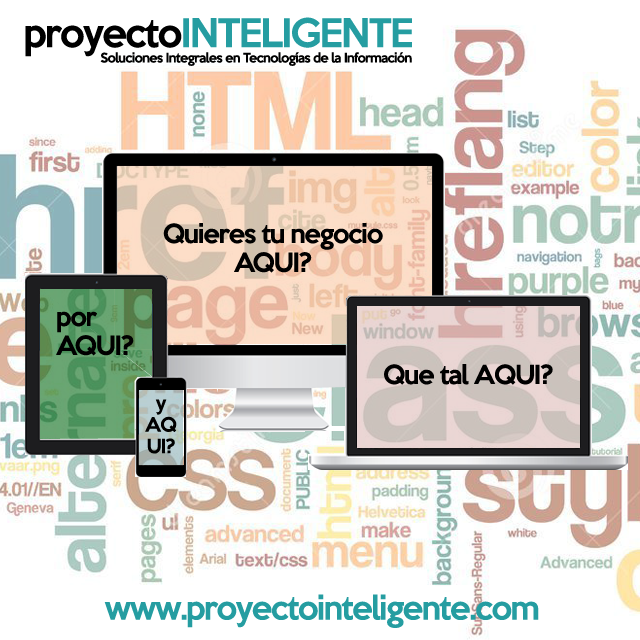
<style>
.page{position:relative;width:640px;height:640px;background:#ffffff}
.page>*{position:absolute;margin:0}
.t1{font:36px "KeepCalm-Medium";letter-spacing:-0.05em;color:#259da1}
.t2{font:36px "KeepCalm-Medium";letter-spacing:-0.05em;color:#000000}
.t3{font:12px "KeepCalm-Medium";letter-spacing:-0.05em;color:#000000}
.t4{font:24px "KeepCalm-Medium";letter-spacing:-0.05em;color:#000000}
.t5{font:18px "KeepCalm-Medium";letter-spacing:-0.05em;color:#000000}
.t6{font:30px "KeepCalm-Medium";letter-spacing:-0.05em;color:#259da1}
</style>
<div class="page">
<p class="t1" style="left:25px;top:17px;width:387px;height:40px"><span class="t2">proyecto</span>INTELIGENTE</p>
<p class="t3" style="left:100px;top:52px;width:312px;height:14px">Soluciones Integrales en Tecnologías de la Información</p>
<p class="t4" style="left:163px;top:223px;width:220px;height:50px;text-align:center">Quieres tu negocio<br>AQUI?</p>
<p class="t4" style="left:56px;top:311px;width:78px;height:45px">por <br>AQUI?</p>
<p class="t4" style="left:384px;top:364px;width:169px;height:21px">Que tal AQUI?</p>
<p class="t5" style="left:145px;top:399px;width:32px;height:55px;text-align:center">y<br>AQ<br>UI?</p>
<p class="t6" style="left:104px;top:594px;width:435px;height:34px">www.proyectointeligente.com</p>
</div>
